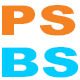
<style>
.page{position:relative;width:80px;height:80px;background:#ffffff}
.page>*{position:absolute;margin:0}
.t1{font:41.3px/41.9px "Arial-Black";color:#f58220;scale:1.32 1}
.t2{font:41.3px/41.9px "Arial-Black";color:#00ccff;scale:1.32 1}
</style>
<div class="page">
<p class="t1" style="left:2px;top:5px;width:77px;height:73px">PS<br><span class="t2">BS</span></p>
</div>
